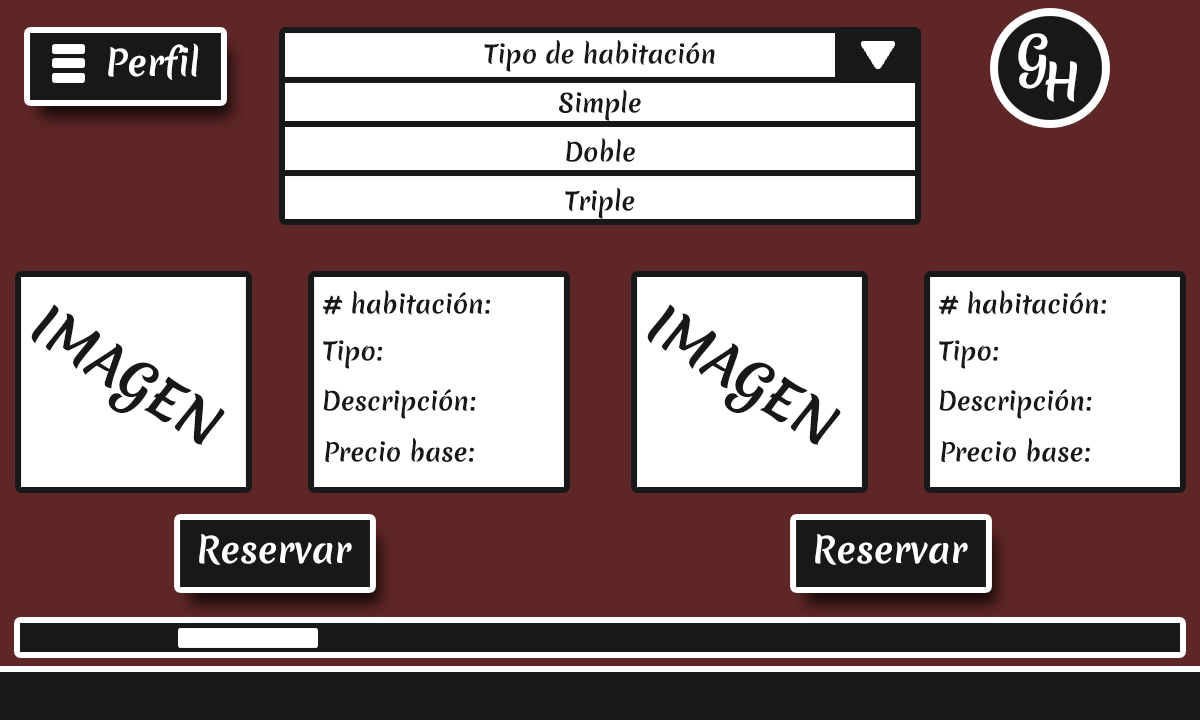
<style>
.page{position:relative;width:1200px;height:720px;background:#5e2626}
.page>*{position:absolute;margin:0}
.t1{font:24.6px "MeriendaOne-Regular";color:#181818}
.t2{font:48.4px "MeriendaOne-Regular";color:#ffffff}
.t3{font:35.1px "MeriendaOne-Regular";color:#ffffff}
.t4{font:51.9px "MeriendaOne-Regular";color:#181818}
</style>
<div class="page">
<p class="t1" style="left:484px;top:39px;width:231px;height:33px">Tipo de habitación</p>
<p class="t2" style="left:1018px;top:33px;width:30px;height:56px">G</p>
<p class="t3" style="left:108px;top:43px;width:91px;height:37px">Perfil</p>
<p class="t2" style="left:1045px;top:61px;width:32px;height:41px">H</p>
<p class="t1" style="left:559px;top:89px;width:82px;height:32px">Simple</p>
<p class="t1" style="left:566px;top:137px;width:69px;height:25px">Doble</p>
<p class="t1" style="left:565px;top:187px;width:70px;height:32px">Triple</p>
<p class="t1" style="left:323px;top:289px;width:168px;height:26px"># habitación:</p>
<p class="t1" style="left:939px;top:289px;width:168px;height:26px"># habitación:</p>
<p class="t4" style="left:31px;top:304px;width:194px;height:141px;rotate:32deg">IMAGEN</p>
<p class="t4" style="left:647px;top:304px;width:194px;height:141px;rotate:32deg">IMAGEN</p>
<p class="t1" style="left:323px;top:340px;width:60px;height:29px">Tipo:</p>
<p class="t1" style="left:939px;top:340px;width:60px;height:29px">Tipo:</p>
<p class="t1" style="left:323px;top:389px;width:153px;height:30px">Descripción:</p>
<p class="t1" style="left:939px;top:389px;width:153px;height:30px">Descripción:</p>
<p class="t1" style="left:325px;top:437px;width:149px;height:26px">Precio base:</p>
<p class="t1" style="left:941px;top:437px;width:149px;height:26px">Precio base:</p>
<p class="t3" style="left:199px;top:534px;width:153px;height:31px">Reservar</p>
<p class="t3" style="left:815px;top:534px;width:153px;height:31px">Reservar</p>
</div>
